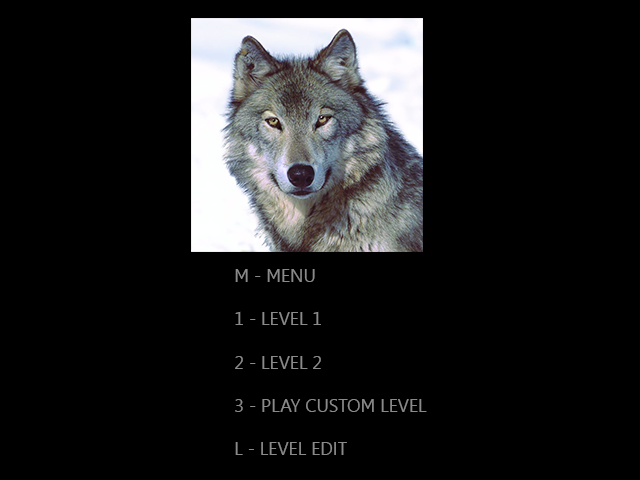
<style>
.page{position:relative;width:640px;height:480px;background:#000000}
.page>*{position:absolute;margin:0}
.t1{font:18px "Gisha";color:#8a8a8a}
.t2{font:24px "Gisha";color:#8a8a8a}
</style>
<div class="page">
<p class="t1" style="left:235px;top:269px;width:192px;height:186px;text-align:right"><span class="t2"><br><br></span>M - MENU<br><br>1 - LEVEL 1<br><br>2 - LEVEL 2<br><br>3 - PLAY CUSTOM LEVEL<br><br>L - LEVEL EDIT</p>
</div>
